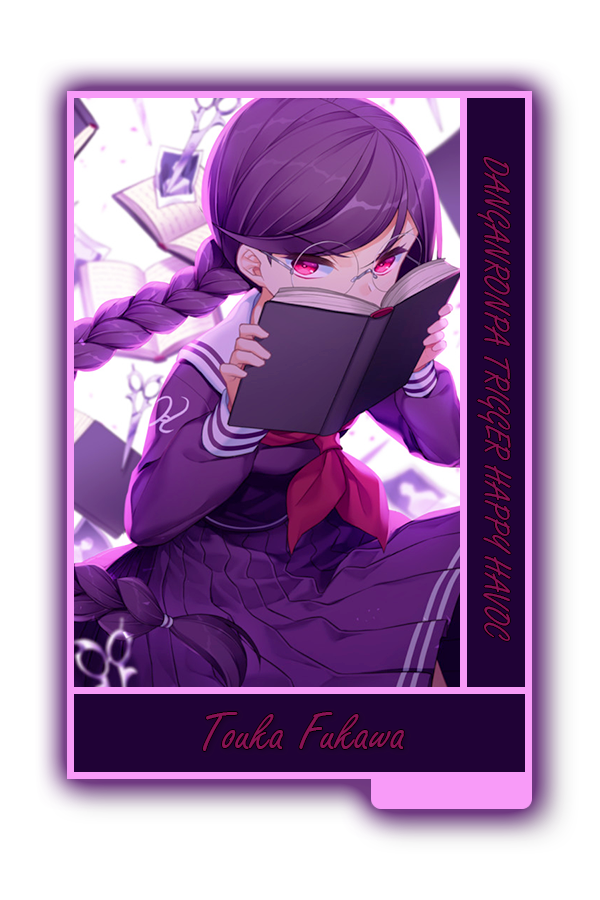
<style>
.page{position:relative;width:600px;height:900px;background:#ffffff}
.page>*{position:absolute;margin:0}
.t1{font:37.3px "FreestyleScript-Regular";color:#71153f}
.t2{font:56px "FreestyleScript-Regular";color:#71153f}
</style>
<div class="page">
<p class="t1" style="left:477px;top:157px;width:35px;height:484px;rotate:90deg">DANGANRONPA TRIGGER HAPPY HAVOC</p>
<p class="t2" style="left:202px;top:712px;width:202px;height:39px">Touka Fukawa</p>
</div>
